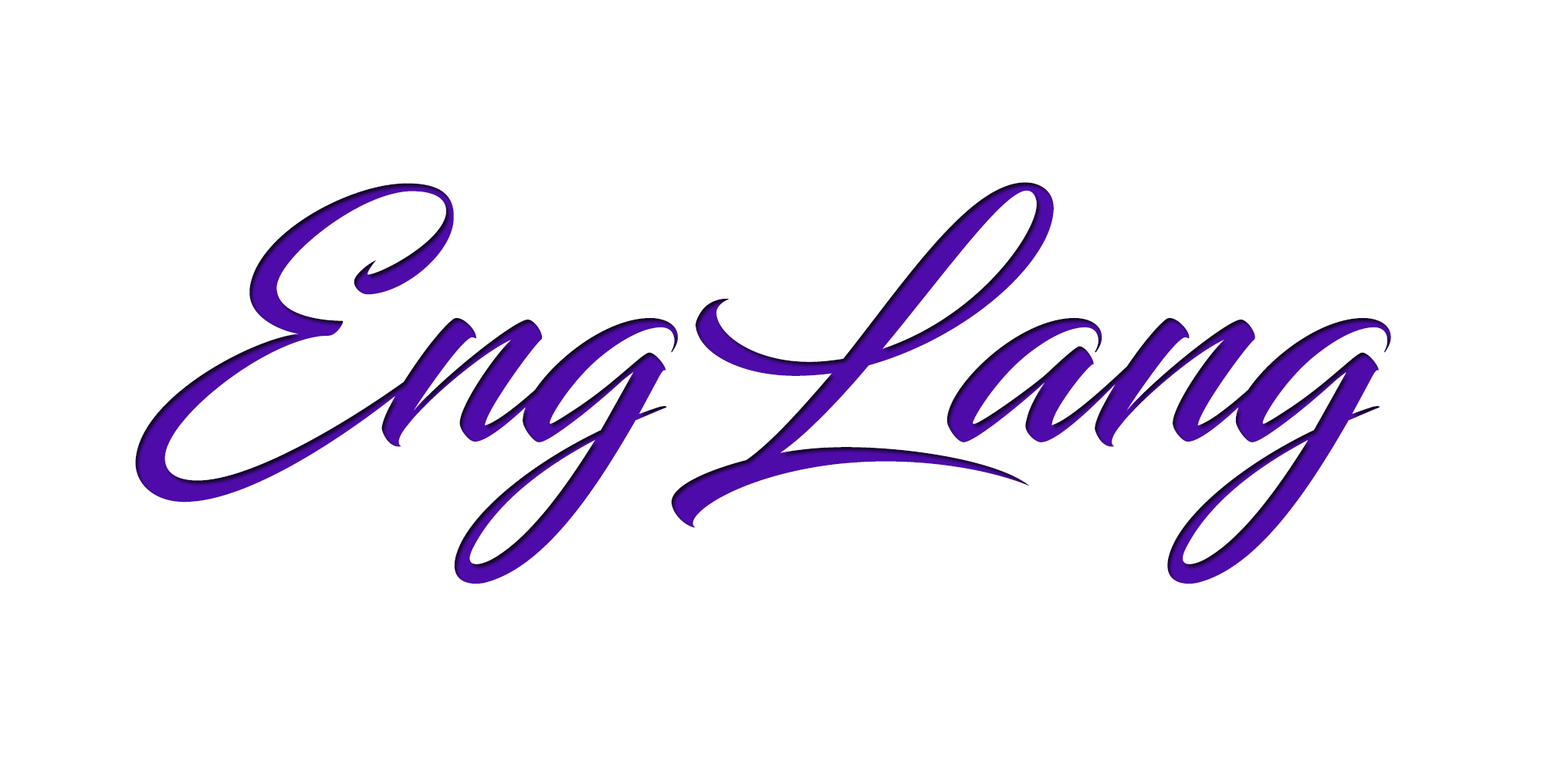
<style>
.page{position:relative;width:1544px;height:772px;background:#ffffff}
.page>*{position:absolute;margin:0}
.t1{font:308.9px "Blacksword";color:#4e0ba9}
</style>
<div class="page">
<p class="t1" style="left:135px;top:182px;width:1256px;height:403px">EngLang</p>
</div>
